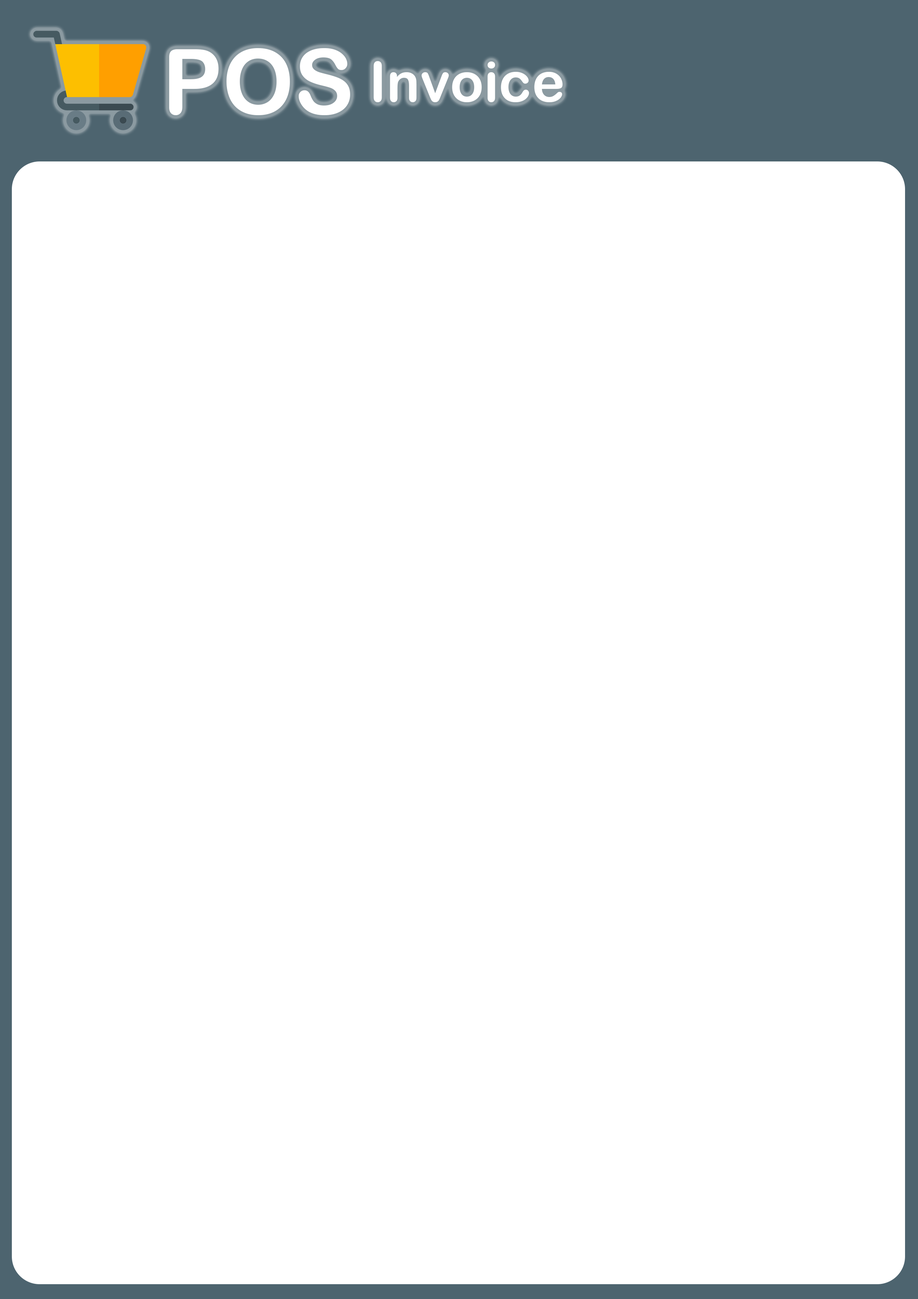
<style>
.page{position:relative;width:918px;height:1299px;background:#ffffff}
.page>*{position:absolute;margin:0}
.t1{font:90.2px "ArialRoundedMTBold";color:#ffffff}
.t2{font:55.5px "ArialRoundedMTBold";color:#ffffff}
</style>
<div class="page">
<p class="t1" style="left:169px;top:48px;width:181px;height:67px">POS</p>
<p class="t2" style="left:374px;top:61px;width:189px;height:41px">Invoice</p>
</div>
